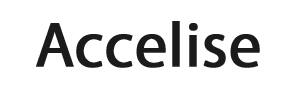
<style>
.page{position:relative;width:300px;height:100px;background:#ffffff}
.page>*{position:absolute;margin:0}
.t1{font:64px "MyriadPro-Regular";color:#1b1b1b;font-weight:bold}
</style>
<div class="page">
<p class="t1" style="left:36px;top:21px;width:224px;height:47px">Accelise</p>
</div>
